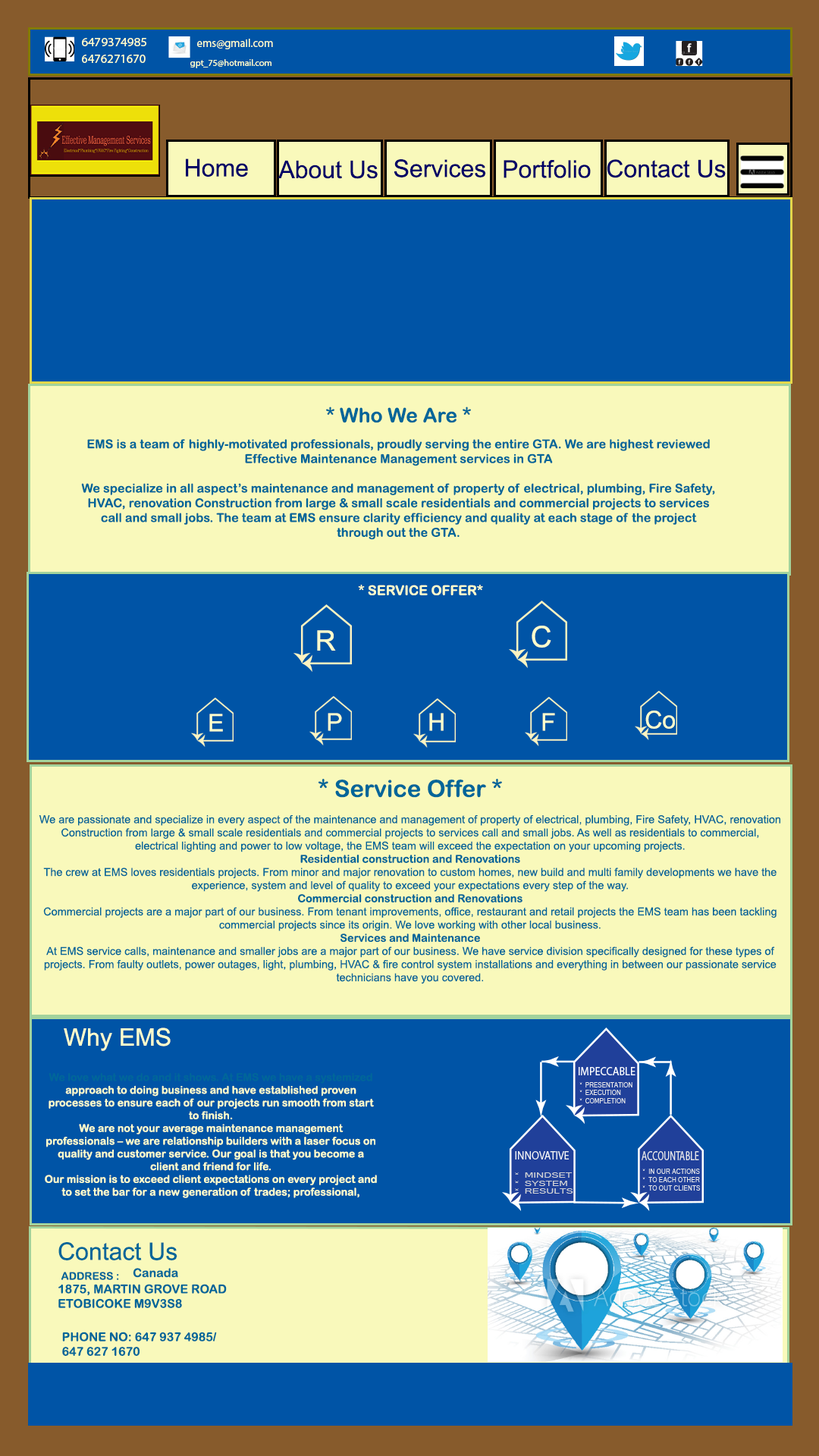
<style>
.page{position:relative;width:819px;height:1456px;background:#0054a6}
.page>*{position:absolute;margin:0}
.t1{font:12.8px "MyriadPro-Regular";color:#ffffcc}
.t2{font:11.2px "MyriadPro-Regular";color:#ffffcc}
.t3{font:12.6px "MyriadPro-Regular";color:#ffffcc}
.t4{font:9.1px "MyriadPro-Regular";color:#ffffcc}
.t5{font:24.3px "ArialMT";color:#000066}
.t6{font:12.3px "ArialRoundedMTBold";color:#006699}
.t7{font:20px "ArialRoundedMTBold";color:#006699}
.t8{font:13.5px "ArialRoundedMTBold";color:#ffffcc}
.t9{font:29.4px "ArialMT";color:#ffffcc}
.t10{font:28.2px "ArialMT";color:#ffffcc}
.t11{font:24.3px "ArialMT";color:#ffffcc}
.t12{font:11px "ArialMT";color:#006699}
.t13{font:23.5px "ArialRoundedMTBold";color:#006699}
.t14{font:11px "ArialRoundedMTBold";color:#006699}
.t15{font:10.6px "ArialRoundedMTBold";color:#ffffcc}
.t16{font:10.6px "ArialRoundedMTBold";color:#006699}
.t17{font:24.3px "ArialMT";color:#006699}
.t18{font:12.1px "ArialRoundedMTBold";color:#006699}
</style>
<div class="page">
<p class="t1" style="left:82px;top:38px;width:64px;height:8px">6479374985</p>
<p class="t2" style="left:197px;top:39px;width:76px;height:10px">ems@gmail.com</p>
<p class="t3" style="left:82px;top:55px;width:64px;height:8px">6476271670</p>
<p class="t4" style="left:190px;top:59px;width:81px;height:9px">gpt_75@hotmail.com</p>
<p class="t5" style="left:186px;top:158px;width:62px;height:19px">Home</p>
<p class="t5" style="left:278px;top:160px;width:100px;height:19px">About Us</p>
<p class="t5" style="left:394px;top:159px;width:92px;height:18px">Services</p>
<p class="t5" style="left:504px;top:160px;width:87px;height:18px">Portfolio</p>
<p class="t5" style="left:607px;top:159px;width:119px;height:19px">Contact Us</p>
<p class="t6" style="left:81px;top:406px;width:634px;height:134px;text-align:center"><span class="t7">* Who We Are *<br><br></span>EMS is a team of highly-motivated professionals, proudly serving the entire GTA. We are highest reviewed Effective Maintenance Management services in GTA<br><br>We specialize in all aspect’s maintenance and management of property of electrical, plumbing, Fire Safety, HVAC, renovation Construction from large &amp; small scale residentials and commercial projects to services call and small jobs. The team at EMS ensure clarity efficiency and quality at each stage of the project through out the GTA.</p>
<p class="t8" style="left:358px;top:585px;width:125px;height:10px">* SERVICE OFFER*</p>
<p class="t9" style="left:532px;top:626px;width:19px;height:22px">C</p>
<p class="t10" style="left:317px;top:630px;width:19px;height:21px">R</p>
<p class="t11" style="left:209px;top:714px;width:14px;height:18px">E</p>
<p class="t11" style="left:328px;top:713px;width:14px;height:18px">P</p>
<p class="t11" style="left:429px;top:713px;width:15px;height:18px">H</p>
<p class="t11" style="left:542px;top:713px;width:13px;height:18px">F</p>
<p class="t11" style="left:645px;top:711px;width:30px;height:18px">Co</p>
<p class="t12" style="left:39px;top:779px;width:741px;height:205px;text-align:center"><span class="t13">* Service Offer *<br></span><br>We are passionate and specialize in every aspect of the maintenance and management of property of electrical, plumbing, Fire Safety, HVAC, renovation Construction from large &amp; small scale residentials and commercial projects to services call and small jobs. As well as residentials to commercial, electrical lighting and power to low voltage, the EMS team will exceed the expectation on your upcoming projects.<br><span class="t14">Residential construction and Renovations<br></span>The crew at EMS loves residentials projects. From minor and major renovation to custom homes, new build and multi family developments we have the experience, system and level of quality to exceed your expectations every step of the way.<br><span class="t14">Commercial construction and Renovations<br></span>Commercial projects are a major part of our business. From tenant improvements, office, restaurant and retail projects the EMS team has been tackling commercial projects since its origin. We love working with other local business.<br><span class="t14">Services and Maintenance<br></span>At EMS service calls, maintenance and smaller jobs are a major part of our business. We have service division specifically designed for these types of projects. From faulty outlets, power outages, light, plumbing, HVAC &amp; fire control system installations and everything in between our passionate service technicians have you covered.</p>
<p class="t11" style="left:64px;top:1028px;width:107px;height:23px">Why EMS</p>
<p class="t15" style="left:45px;top:1073px;width:332px;height:125px;text-align:center"><span class="t16">We love what we do and it shows. At EMS we have a systemized </span>approach to doing business and have established proven processes to ensure each of our projects run smooth from start to finish.<br>We are not your average maintenance management professionals – we are relationship builders with a laser focus on quality and customer service. Our goal is that you become a client and friend for life.<br>Our mission is to exceed client expectations on every project and to set the bar for a new generation of trades; professional, <span class="t16">approachable, ethical and dependable.</span></p>
<p class="t17" style="left:58px;top:1242px;width:119px;height:18px">Contact Us</p>
<p class="t16" style="left:61px;top:1272px;width:58px;height:8px">ADDRESS :</p>
<p class="t18" style="left:133px;top:1268px;width:45px;height:10px">Canada</p>
<p class="t18" style="left:58px;top:1284px;width:169px;height:24px">1875, MARTIN GROVE ROAD ETOBICOKE M9V3S8</p>
<p class="t18" style="left:62px;top:1332px;width:155px;height:24px">PHONE NO: 647 937 4985/                      647 627 1670</p>
</div>
